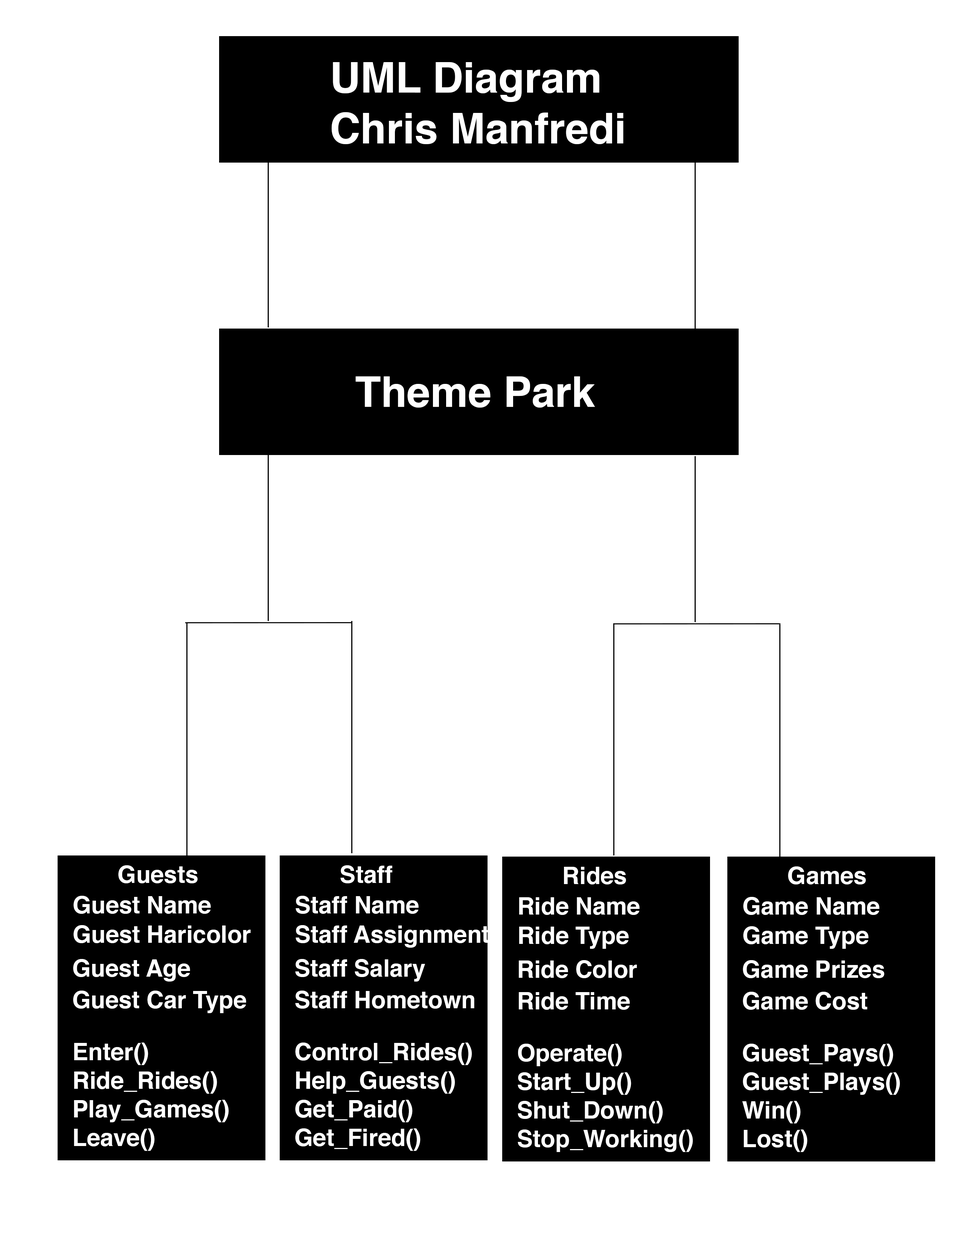
<style>
.page{position:relative;width:960px;height:1242px;background:#ffffff}
.page>*{position:absolute;margin:0}
.t1{font:42.3px "Helvetica-Bold";color:#ffffff}
.t2{font:23.8px "Helvetica-Bold";color:#ffffff}
</style>
<div class="page">
<p class="t1" style="left:331px;top:62px;width:292px;height:82px">UML Diagram<br>Chris Manfredi</p>
<p class="t1" style="left:355px;top:376px;width:240px;height:32px">Theme Park</p>
<p class="t2" style="left:118px;top:865px;width:80px;height:18px">Guests</p>
<p class="t2" style="left:340px;top:865px;width:52px;height:18px">Staff</p>
<p class="t2" style="left:564px;top:867px;width:62px;height:18px">Rides</p>
<p class="t2" style="left:788px;top:867px;width:78px;height:18px">Games</p>
<p class="t2" style="left:73px;top:896px;width:138px;height:18px">Guest Name</p>
<p class="t2" style="left:296px;top:896px;width:123px;height:18px">Staff Name</p>
<p class="t2" style="left:519px;top:897px;width:121px;height:18px">Ride Name</p>
<p class="t2" style="left:743px;top:897px;width:136px;height:18px">Game Name</p>
<p class="t2" style="left:73px;top:925px;width:178px;height:18px">Guest Haricolor</p>
<p class="t2" style="left:296px;top:925px;width:193px;height:23px">Staff Assignment</p>
<p class="t2" style="left:519px;top:927px;width:110px;height:22px">Ride Type</p>
<p class="t2" style="left:743px;top:926px;width:125px;height:23px">Game Type</p>
<p class="t2" style="left:73px;top:959px;width:117px;height:23px">Guest Age</p>
<p class="t2" style="left:295px;top:959px;width:130px;height:23px">Staff Salary</p>
<p class="t2" style="left:519px;top:960px;width:118px;height:18px">Ride Color</p>
<p class="t2" style="left:743px;top:960px;width:141px;height:18px">Game Prizes</p>
<p class="t2" style="left:73px;top:991px;width:173px;height:22px">Guest Car Type</p>
<p class="t2" style="left:295px;top:991px;width:179px;height:18px">Staff Hometown</p>
<p class="t2" style="left:519px;top:992px;width:111px;height:18px">Ride Time</p>
<p class="t2" style="left:743px;top:992px;width:124px;height:18px">Game Cost</p>
<p class="t2" style="left:74px;top:1043px;width:155px;height:108px">Enter()<br>Ride_Rides()<br>Play_Games()<br>Leave()</p>
<p class="t2" style="left:295px;top:1043px;width:177px;height:108px">Control_Rides()<br>Help_Guests()<br>Get_Paid()<br>Get_Fired()</p>
<p class="t2" style="left:518px;top:1044px;width:175px;height:108px">Operate()<br>Start_Up()<br>Shut_Down()<br>Stop_Working()</p>
<p class="t2" style="left:742px;top:1044px;width:158px;height:108px">Guest_Pays()<br>Guest_Plays()<br>Win()<br>Lost()</p>
</div>
